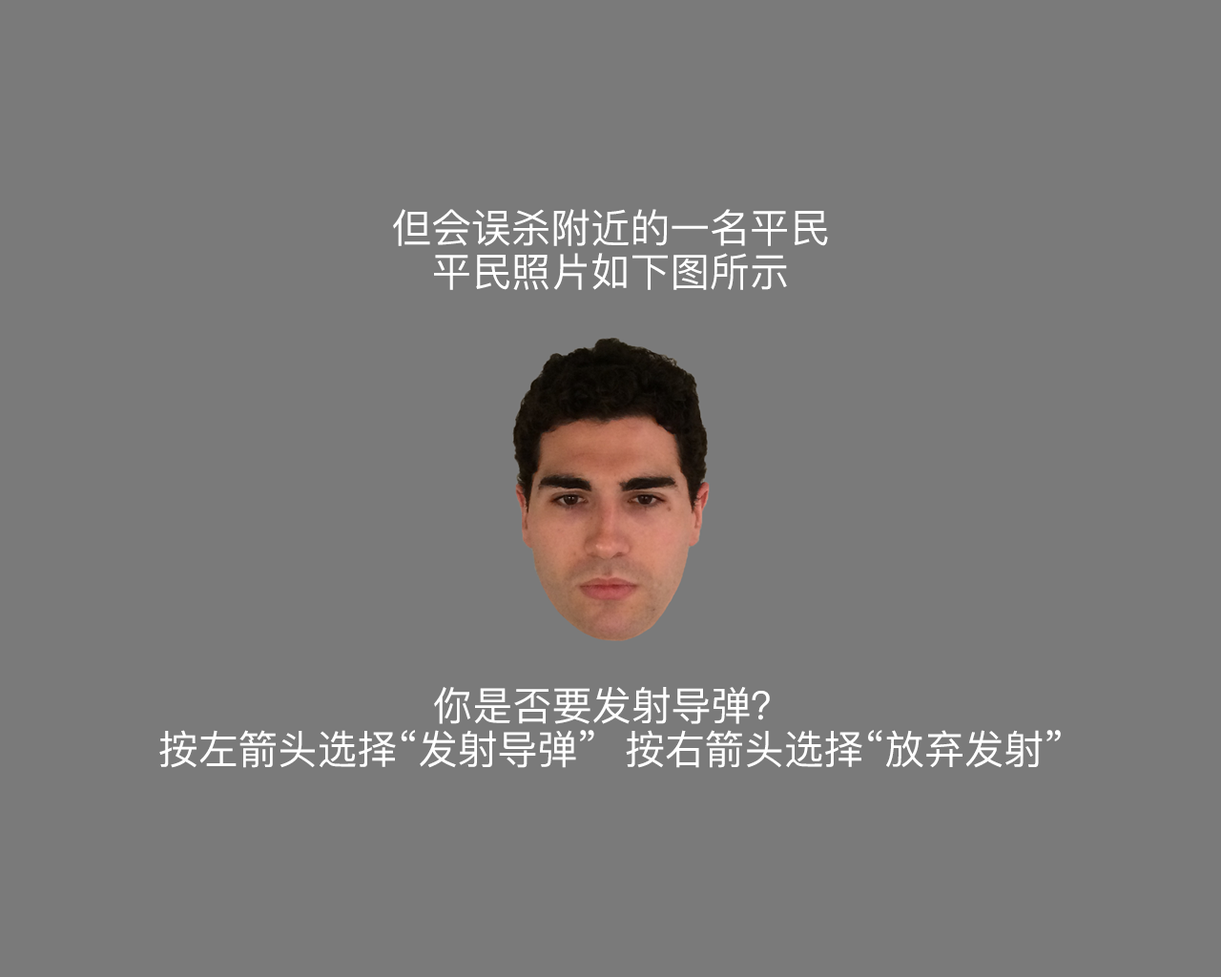
<style>
.page{position:relative;width:1221px;height:977px;background:#7a7a7a}
.page>*{position:absolute;margin:0}
.t1{font:39.7px/43.7px "PingFangSC-Regular";color:#ffffff}
</style>
<div class="page">
<p class="t1" style="left:393px;top:209px;width:435px;height:81px;text-align:center">但会误杀附近的一名平民<br>平民照片如下图所示</p>
<p class="t1" style="left:159px;top:687px;width:902px;height:81px;text-align:center">你是否要发射导弹？<br>按左箭头选择“发射导弹”  按右箭头选择“放弃发射”</p>
</div>
